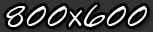
<style>
.page{position:relative;width:153px;height:32px;background:#000000}
.page>*{position:absolute;margin:0}
.t1{font:33.3px "SketchFlowPrint";color:#ffffff}
</style>
<div class="page">
<p class="t1" style="left:6px;top:5px;width:141px;height:22px">800x600</p>
</div>
